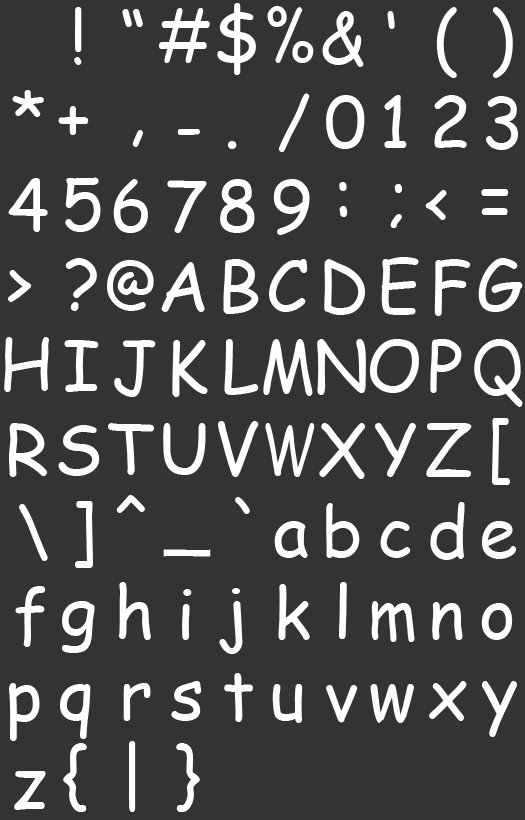
<style>
.page{position:relative;width:525px;height:820px;background:#333333}
.page>*{position:absolute;margin:0}
.t1{font:70px "ComicSansMS";color:#ffffff}
.t2{font:70px "ComicSansMS";color:#ffffff;scale:0.91 1}
.t3{font:70px "ComicSansMS";color:#ffffff;scale:0.89 1}
.t4{font:60.8px "ComicSansMS";color:#ffffff;scale:0.95 1}
.t5{font:69px "ComicSansMS";color:#ffffff;scale:1.05 1}
.t6{font:70px "ComicSansMS";color:#ffffff;scale:0.84 1}
.t7{font:68.8px "ComicSansMS";color:#ffffff;scale:0.73 1}
.t8{font:65.9px "ComicSansMS";color:#ffffff;scale:1.06 1}
.t9{font:66.7px "ComicSansMS";color:#ffffff;scale:1.05 1}
.t10{font:70px "ComicSansMS";color:#ffffff;scale:0.9 1}
</style>
<div class="page">
<p class="t1" style="left:217px;top:3px;width:39px;height:72px">$</p>
<p class="t2" style="left:267px;top:6px;width:47px;height:57px">%</p>
<p class="t1" style="left:74px;top:7px;width:8px;height:58px">!</p>
<p class="t1" style="left:122px;top:9px;width:21px;height:18px">“</p>
<p class="t3" style="left:159px;top:8px;width:51px;height:55px">#</p>
<p class="t1" style="left:322px;top:11px;width:42px;height:56px">&amp;</p>
<p class="t1" style="left:387px;top:11px;width:8px;height:18px">‘</p>
<p class="t1" style="left:436px;top:7px;width:21px;height:71px">(</p>
<p class="t1" style="left:492px;top:7px;width:21px;height:71px">)</p>
<p class="t1" style="left:12px;top:90px;width:32px;height:27px">*</p>
<p class="t1" style="left:278px;top:93px;width:32px;height:59px">/</p>
<p class="t1" style="left:326px;top:95px;width:39px;height:54px">0</p>
<p class="t1" style="left:384px;top:95px;width:23px;height:53px">1</p>
<p class="t1" style="left:434px;top:95px;width:33px;height:53px">2</p>
<p class="t1" style="left:486px;top:96px;width:32px;height:54px">3</p>
<p class="t1" style="left:58px;top:106px;width:31px;height:29px">+</p>
<p class="t1" style="left:132px;top:130px;width:11px;height:17px">,</p>
<p class="t1" style="left:177px;top:129px;width:23px;height:6px">-</p>
<p class="t1" style="left:227px;top:141px;width:10px;height:8px">.</p>
<p class="t1" style="left:8px;top:178px;width:40px;height:54px">4</p>
<p class="t1" style="left:65px;top:177px;width:36px;height:55px">5</p>
<p class="t1" style="left:113px;top:179px;width:35px;height:54px">6</p>
<p class="t1" style="left:167px;top:180px;width:40px;height:53px">7</p>
<p class="t1" style="left:220px;top:179px;width:35px;height:54px">8</p>
<p class="t1" style="left:273px;top:179px;width:37px;height:56px">9</p>
<p class="t1" style="left:339px;top:182px;width:9px;height:35px">:</p>
<p class="t1" style="left:390px;top:184px;width:12px;height:44px">;</p>
<p class="t1" style="left:425px;top:190px;width:22px;height:30px">&lt;</p>
<p class="t1" style="left:481px;top:189px;width:28px;height:26px">=</p>
<p class="t1" style="left:381px;top:257px;width:38px;height:58px">E</p>
<p class="t1" style="left:8px;top:270px;width:24px;height:32px">&gt;</p>
<p class="t1" style="left:65px;top:258px;width:32px;height:53px">?</p>
<p class="t4" style="left:107px;top:260px;width:47px;height:51px">@</p>
<p class="t5" style="left:161px;top:262px;width:44px;height:50px">A</p>
<p class="t1" style="left:223px;top:259px;width:36px;height:55px">B</p>
<p class="t1" style="left:269px;top:259px;width:39px;height:53px">C</p>
<p class="t1" style="left:324px;top:259px;width:41px;height:56px">D</p>
<p class="t1" style="left:434px;top:259px;width:37px;height:57px">F</p>
<p class="t1" style="left:478px;top:258px;width:45px;height:54px">G</p>
<p class="t1" style="left:4px;top:337px;width:45px;height:55px">H</p>
<p class="t1" style="left:64px;top:340px;width:35px;height:52px">I</p>
<p class="t1" style="left:114px;top:340px;width:42px;height:57px">J</p>
<p class="t1" style="left:172px;top:340px;width:36px;height:57px">K</p>
<p class="t1" style="left:224px;top:339px;width:35px;height:56px">L</p>
<p class="t3" style="left:263px;top:339px;width:50px;height:57px">M</p>
<p class="t1" style="left:317px;top:339px;width:49px;height:56px">N</p>
<p class="t1" style="left:370px;top:339px;width:49px;height:54px">O</p>
<p class="t1" style="left:430px;top:339px;width:32px;height:54px">P</p>
<p class="t6" style="left:474px;top:339px;width:49px;height:68px">Q</p>
<p class="t1" style="left:9px;top:423px;width:38px;height:54px">R</p>
<p class="t1" style="left:58px;top:425px;width:42px;height:51px">S</p>
<p class="t1" style="left:108px;top:423px;width:46px;height:52px">T</p>
<p class="t1" style="left:163px;top:423px;width:43px;height:52px">U</p>
<p class="t1" style="left:218px;top:421px;width:41px;height:56px">V</p>
<p class="t7" style="left:265px;top:423px;width:50px;height:54px">W</p>
<p class="t1" style="left:319px;top:423px;width:46px;height:56px">X</p>
<p class="t1" style="left:375px;top:423px;width:41px;height:54px">Y</p>
<p class="t1" style="left:426px;top:423px;width:46px;height:54px">Z</p>
<p class="t1" style="left:492px;top:418px;width:18px;height:67px">[</p>
<p class="t1" style="left:116px;top:495px;width:29px;height:18px">^</p>
<p class="t1" style="left:235px;top:497px;width:15px;height:17px">`</p>
<p class="t1" style="left:19px;top:504px;width:29px;height:57px">\</p>
<p class="t1" style="left:75px;top:501px;width:18px;height:67px">]</p>
<p class="t1" style="left:326px;top:503px;width:34px;height:55px">b</p>
<p class="t1" style="left:430px;top:502px;width:35px;height:58px">d</p>
<p class="t1" style="left:274px;top:521px;width:34px;height:37px">a</p>
<p class="t1" style="left:380px;top:521px;width:31px;height:37px">c</p>
<p class="t1" style="left:482px;top:521px;width:34px;height:38px">e</p>
<p class="t1" style="left:163px;top:549px;width:48px;height:8px">_</p>
<p class="t1" style="left:118px;top:582px;width:33px;height:58px">h</p>
<p class="t1" style="left:339px;top:582px;width:8px;height:57px">l</p>
<p class="t1" style="left:15px;top:586px;width:31px;height:61px">f</p>
<p class="t1" style="left:182px;top:589px;width:10px;height:51px">i</p>
<p class="t8" style="left:219px;top:588px;width:24px;height:66px">j</p>
<p class="t1" style="left:278px;top:584px;width:32px;height:56px">k</p>
<p class="t9" style="left:62px;top:601px;width:33px;height:52px">g</p>
<p class="t10" style="left:371px;top:601px;width:44px;height:41px">m</p>
<p class="t1" style="left:432px;top:602px;width:31px;height:38px">n</p>
<p class="t1" style="left:481px;top:603px;width:32px;height:37px">o</p>
<p class="t1" style="left:224px;top:673px;width:29px;height:49px">t</p>
<p class="t1" style="left:9px;top:683px;width:31px;height:58px">p</p>
<p class="t1" style="left:60px;top:684px;width:31px;height:55px">q</p>
<p class="t1" style="left:123px;top:683px;width:28px;height:38px">r</p>
<p class="t1" style="left:171px;top:681px;width:31px;height:40px">s</p>
<p class="t1" style="left:272px;top:684px;width:31px;height:39px">u</p>
<p class="t1" style="left:326px;top:685px;width:32px;height:38px">v</p>
<p class="t1" style="left:370px;top:684px;width:44px;height:39px">w</p>
<p class="t1" style="left:429px;top:681px;width:38px;height:40px">x</p>
<p class="t1" style="left:481px;top:681px;width:36px;height:56px">y</p>
<p class="t1" style="left:63px;top:743px;width:24px;height:69px">{</p>
<p class="t1" style="left:129px;top:741px;width:7px;height:71px">|</p>
<p class="t1" style="left:176px;top:743px;width:24px;height:69px">}</p>
<p class="t1" style="left:14px;top:771px;width:32px;height:39px">z</p>
</div>
